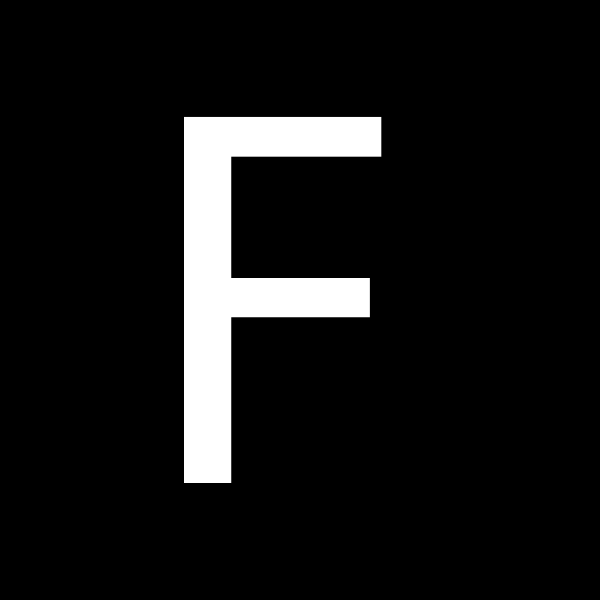
<style>
.page{position:relative;width:600px;height:600px;background:#000000}
.page>*{position:absolute;margin:0}
.t1{font:543.6px "MyriadPro-Regular";color:#ffffff}
</style>
<div class="page">
<p class="t1" style="left:184px;top:116px;width:198px;height:367px">F</p>
</div>
